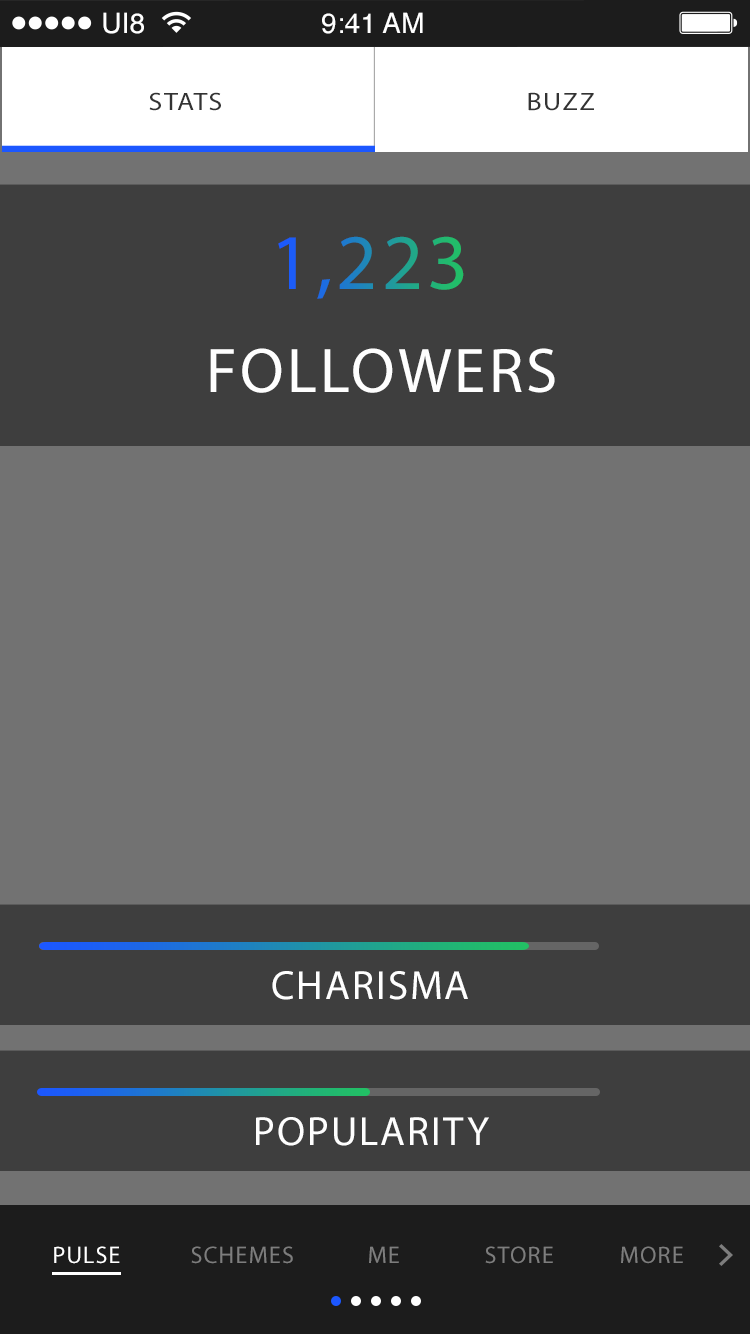
<style>
.page{position:relative;width:750px;height:1334px;background:#727272}
.page>*{position:absolute;margin:0}
.t1{font:28.1px "Helvetica";color:#ffffff}
.t2{font:25.2px "MyriadPro-Regular";letter-spacing:0.05em;color:#333333;text-transform:uppercase;scale:1.11 1}
.t3{font:79.3px "MyriadPro-Regular";letter-spacing:0.05em;text-transform:uppercase}
.t4{font:63.3px "MyriadPro-Regular";letter-spacing:0.05em;color:#fefefe;text-transform:uppercase}
.t5{font:40.7px "MyriadPro-Regular";letter-spacing:0.05em;color:#fefefe;text-transform:uppercase}
.t6{font:24px "MyriadPro-Regular";letter-spacing:0.05em;color:#ffffff;text-transform:uppercase}
.t7{font:24px "MyriadPro-Regular";letter-spacing:0.05em;color:#7d7d7d;text-transform:uppercase}
</style>
<div class="page">
<p class="t1" style="left:103px;top:12px;width:41px;height:22px">UI8</p>
<p class="t1" style="left:322px;top:12px;width:101px;height:22px">9:41 AM</p>
<p class="t2" style="left:149px;top:92px;width:72px;height:19px">Stats</p>
<p class="t2" style="left:528px;top:92px;width:66px;height:19px">Buzz</p>
<p class="t3" style="left:278px;top:236px;width:186px;height:63px">1,223</p>
<p class="t4" style="left:210px;top:348px;width:345px;height:45px">Followers</p>
<p class="t5" style="left:272px;top:971px;width:196px;height:29px">Charisma</p>
<p class="t5" style="left:256px;top:1117px;width:233px;height:29px">Popularity</p>
<p class="t6" style="left:54px;top:1246px;width:66px;height:18px">Pulse</p>
<p class="t7" style="left:191px;top:1246px;width:102px;height:18px">Schemes</p>
<p class="t7" style="left:369px;top:1246px;width:30px;height:17px">Me</p>
<p class="t7" style="left:485px;top:1246px;width:68px;height:18px">Store</p>
<p class="t7" style="left:621px;top:1246px;width:62px;height:18px">More</p>
</div>
